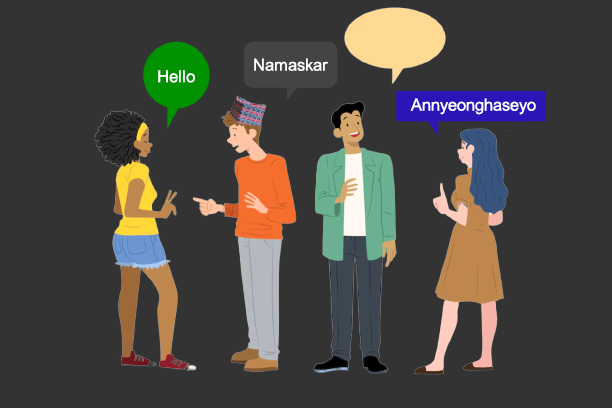
<style>
.page{position:relative;width:612px;height:408px;background:#333333}
.page>*{position:absolute;margin:0}
.t1{font:16.7px "ArialMT";color:#ffffff}
</style>
<div class="page">
<p class="t1" style="left:254px;top:58px;width:74px;height:13px">Namaskar</p>
<p class="t1" style="left:158px;top:70px;width:37px;height:13px">Hello</p>
<p class="t1" style="left:410px;top:98px;width:126px;height:17px">Annyeonghaseyo</p>
</div>
